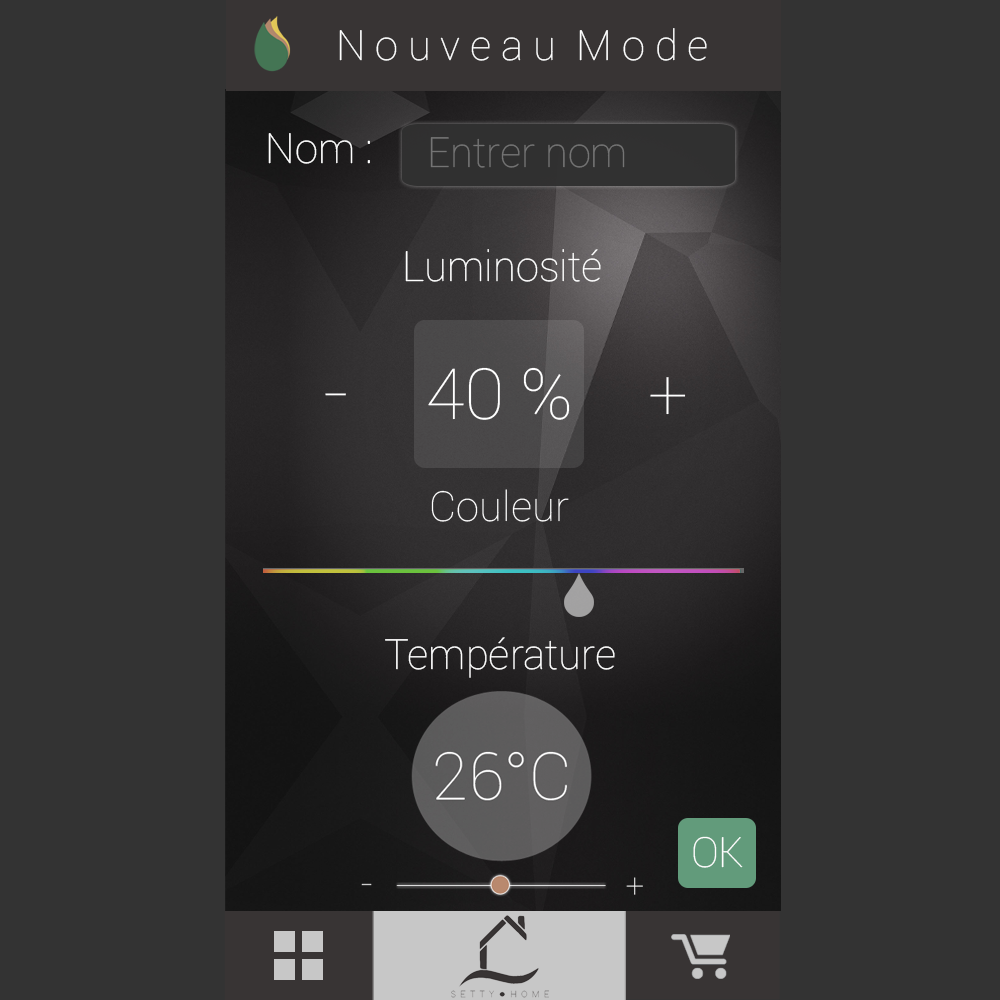
<style>
.page{position:relative;width:1000px;height:1000px;background:#333333}
.page>*{position:absolute;margin:0}
.t1{font:41.7px "Roboto-Thin";color:#ffffff}
.t2{font:41.6px "Roboto-Thin";color:#747474}
.t3{font:41.6px "Roboto-Thin";color:#ffffff}
</style>
<div class="page">
<p class="t1" style="left:339px;top:28px;width:368px;height:33px">N o u v e a u  M o d e</p>
<p class="t1" style="left:268px;top:133px;width:102px;height:31px">Nom :</p>
<p class="t2" style="left:430px;top:137px;width:195px;height:31px">Entrer nom</p>
<p class="t3" style="left:405px;top:249px;width:196px;height:33px">Luminosité</p>
<p class="t3" style="left:385px;top:637px;width:230px;height:41px">Température</p>
<p class="t1" style="left:693px;top:836px;width:50px;height:32px">OK</p>
</div>
